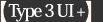
<style>
.page{position:relative;width:103px;height:22px;background:#333333}
.page>*{position:absolute;margin:0}
.t1{font:18px "HeiseiMinStd-W7";letter-spacing:-0.08em;color:#ffffff}
</style>
<div class="page">
<p class="t1" style="left:8px;top:4px;width:77px;height:18px">Type 3 UI +</p>
</div>
